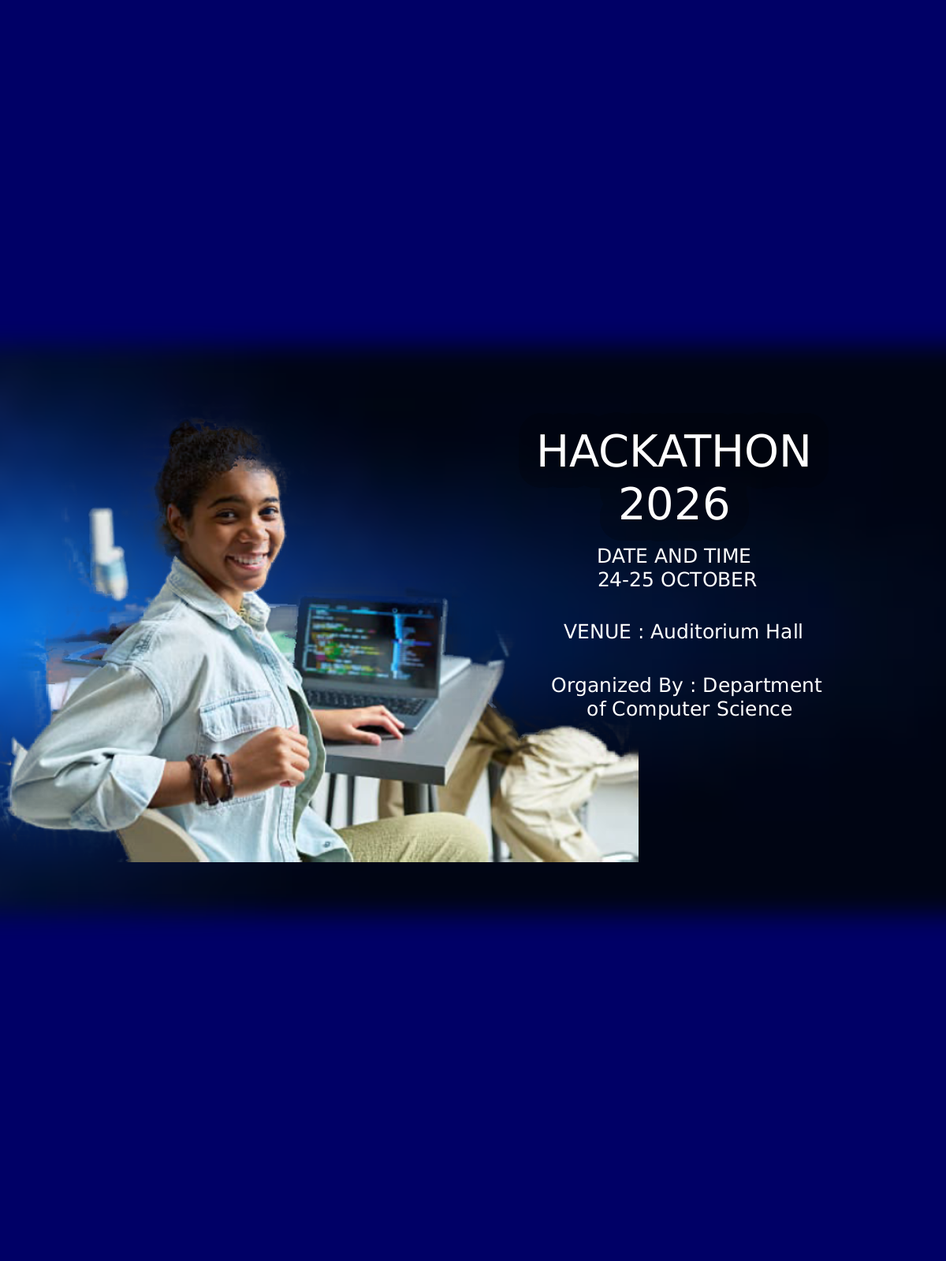
<style>
.page{position:relative;width:946px;height:1261px;background:#000066}
.page>*{position:absolute;margin:0}
.t1{font:44.1px "Arial";color:#ffffff}
.t2{font:19.7px "Arial";color:#ffffff}
</style>
<div class="page">
<p class="t1" style="left:540px;top:433px;width:268px;height:87px;text-align:center">HACKATHON<br>2026</p>
<p class="t2" style="left:598px;top:548px;width:159px;height:39px;text-align:center">DATE AND TIME <br>24-25 OCTOBER</p>
<p class="t2" style="left:563px;top:623px;width:238px;height:16px">VENUE : Auditorium Hall</p>
<p class="t2" style="left:552px;top:677px;width:270px;height:43px;text-align:center">Organized By : Department <br>of Computer Science</p>
</div>
